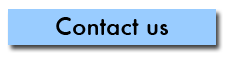
<style>
.page{position:relative;width:227px;height:57px;background:#99ccff}
.page>*{position:absolute;margin:0}
.t1{font:24px "Station-Medium";color:#000000}
</style>
<div class="page">
<p class="t1" style="left:56px;top:17px;width:112px;height:18px">Contact us</p>
</div>
